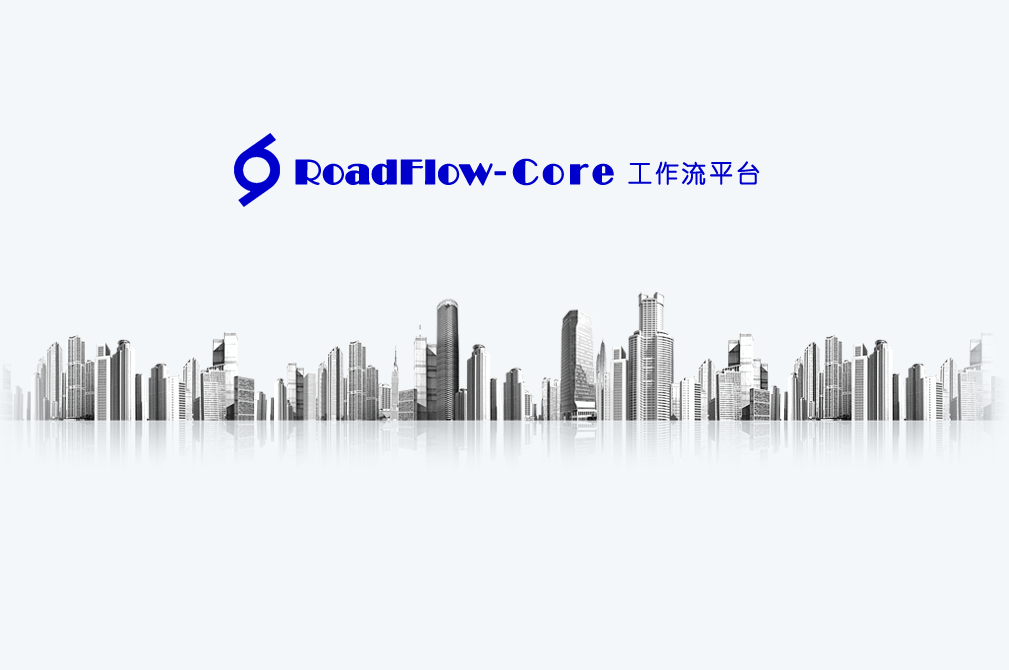
<style>
.page{position:relative;width:1009px;height:670px;background:#f3f7f9}
.page>*{position:absolute;margin:0}
.t1{font:36px "Broadway";color:#0000cc;font-weight:bold}
.t2{font:36px "MicrosoftYaHei";letter-spacing:0.1em;color:#0000cc;font-weight:bold}
.t3{font:36px "Broadway";letter-spacing:0.1em;color:#0000cc;font-weight:bold}
.t4{font:24px "YouYuan";letter-spacing:0.1em;color:#0000cc;font-weight:bold}
</style>
<div class="page">
<p class="t1" style="left:295px;top:158px;width:319px;height:28px">RoadFlow<span class="t2">-</span><span class="t3">Core</span></p>
<p class="t4" style="left:628px;top:161px;width:132px;height:24px">工作流平台</p>
</div>
